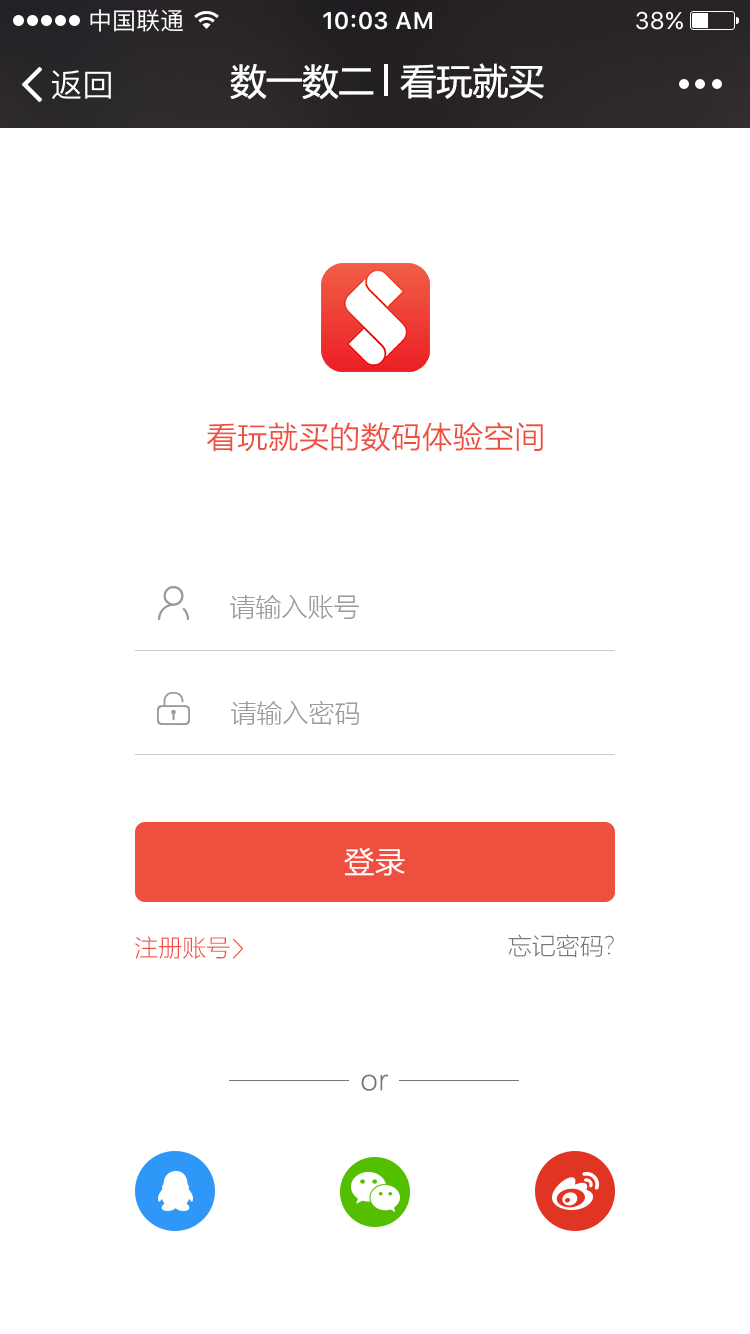
<style>
.page{position:relative;width:750px;height:1334px;background:#ffffff}
.page>*{position:absolute;margin:0}
.t1{font:36px "MicrosoftYaHei";color:#ffffff}
.t2{font:30px "MicrosoftYaHeiLight";color:#ef4f3e;font-weight:bold}
.t3{font:26px "MicrosoftYaHeiLight";color:#9c9c9c}
.t4{font:30px "MicrosoftYaHeiLight";color:#ffffff;font-weight:bold}
.t5{font:24px "MicrosoftYaHeiLight";color:#ef4f3e}
.t6{font:24px "MicrosoftYaHeiLight";color:#777777}
.t7{font:28px "MicrosoftYaHeiLight";color:#777777;font-weight:bold}
</style>
<div class="page">
<p class="t1" style="left:230px;top:63px;width:144px;height:37px">数一数二</p>
<p class="t1" style="left:400px;top:63px;width:144px;height:36px">看玩就买</p>
<p class="t2" style="left:207px;top:422px;width:336px;height:30px">看玩就买的数码体验空间</p>
<p class="t3" style="left:230px;top:595px;width:129px;height:24px">请输入账号</p>
<p class="t3" style="left:231px;top:701px;width:128px;height:24px">请输入密码</p>
<p class="t4" style="left:344px;top:847px;width:61px;height:29px">登录</p>
<p class="t5" style="left:135px;top:936px;width:95px;height:23px">注册账号</p>
<p class="t6" style="left:508px;top:934px;width:106px;height:24px">忘记密码?</p>
<p class="t7" style="left:361px;top:1074px;width:27px;height:17px">or</p>
</div>
